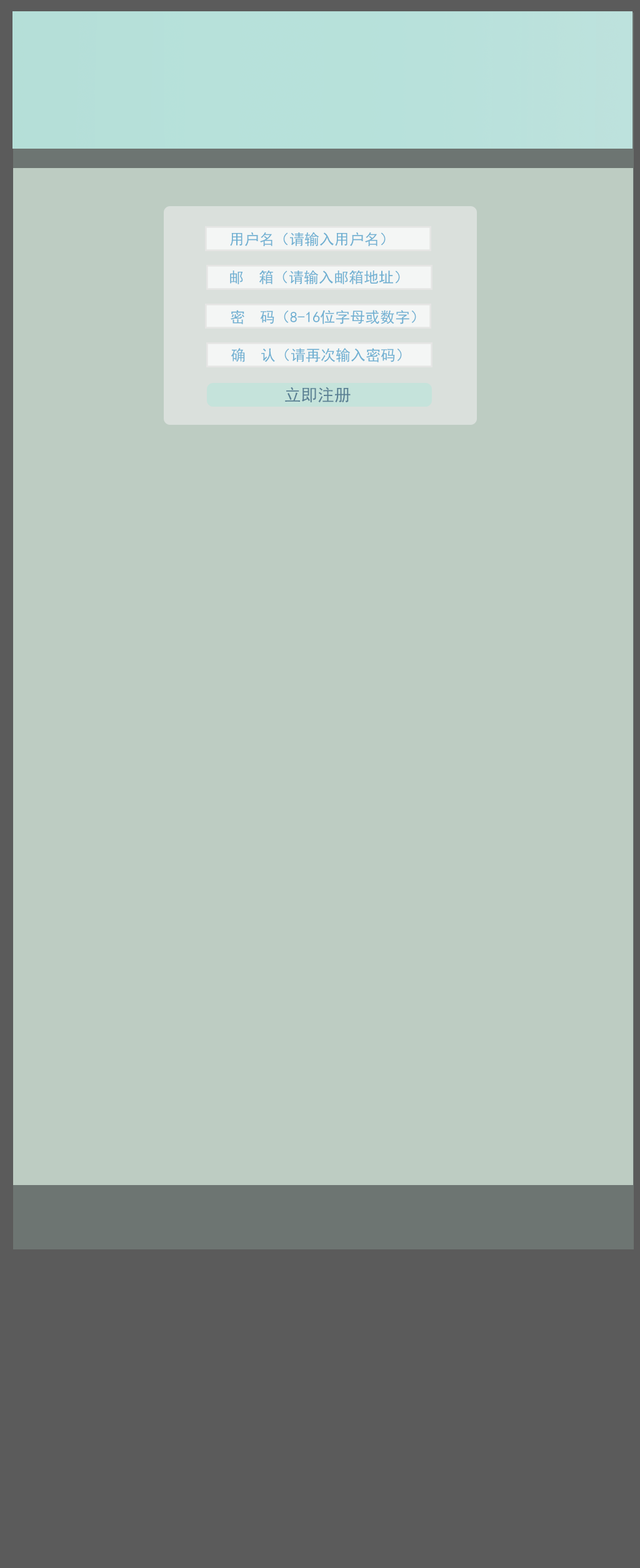
<style>
.page{position:relative;width:640px;height:1568px;background:#bdccc2}
.page>*{position:absolute;margin:0}
.t1{font:15px "SimHei";color:#70b0d2}
.t2{font:16.7px "SimHei";color:#597f93}
</style>
<div class="page">
<p class="t1" style="left:230px;top:232px;width:155px;height:14px">用户名（请输入用户名）</p>
<p class="t1" style="left:230px;top:270px;width:170px;height:14px">邮  箱（请输入邮箱地址）</p>
<p class="t1" style="left:231px;top:310px;width:185px;height:14px">密  码（8-16位字母或数字）</p>
<p class="t1" style="left:231px;top:348px;width:171px;height:14px">确  认（请再次输入密码）</p>
<p class="t2" style="left:285px;top:387px;width:65px;height:16px">立即注册</p>
</div>
